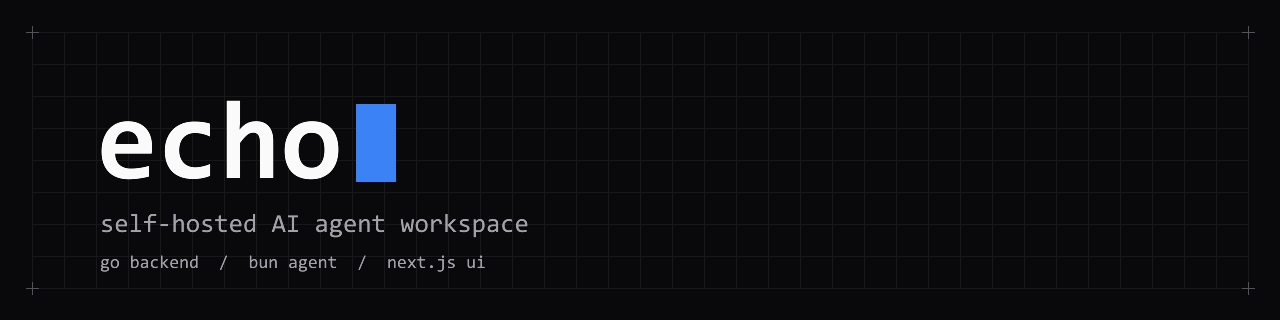
<style>
.page{position:relative;width:1280px;height:320px;background:#09090b}
.page>*{position:absolute;margin:0}
.t1{font:112px "Consolas-Bold";color:#fafafa}
.t2{font:26px "Consolas";color:#a1a1aa}
.t3{font:18px "Consolas";color:#a1a1aa}
</style>
<div class="page">
<p class="t1" style="left:101px;top:100px;width:238px;height:80px">echo</p>
<p class="t2" style="left:102px;top:214px;width:426px;height:24px">self-hosted AI agent workspace</p>
<p class="t3" style="left:100px;top:255px;width:385px;height:17px">go backend  /  bun agent  /  next.js ui</p>
</div>
